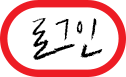
<style>
.page{position:relative;width:126px;height:77px;background:#ffffff}
.page>*{position:absolute;margin:0}
.t1{font:55.1px "SDGongPil-aMd";letter-spacing:-0.06em;color:#000000}
</style>
<div class="page">
<p class="t1" style="left:32px;top:17px;width:71px;height:43px">로그인</p>
</div>
